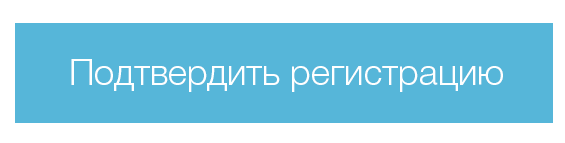
<style>
.page{position:relative;width:565px;height:143px;background:#56b6d9}
.page>*{position:absolute;margin:0}
.t1{font:36px "HelveticaNeueCyr-Light";color:#ffffff}
</style>
<div class="page">
<p class="t1" style="left:71px;top:59px;width:432px;height:33px">Подтвердить регистрацию</p>
</div>
